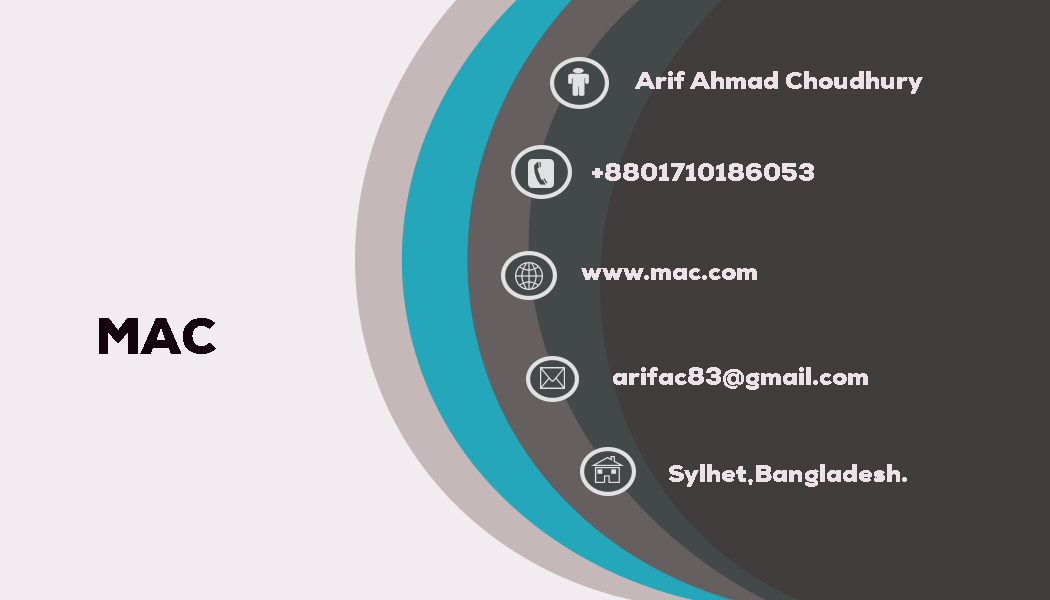
<style>
.page{position:relative;width:1050px;height:600px;background:#f2ebef}
.page>*{position:absolute;margin:0}
.t1{font:25px "NexaW01-Black";color:#ede2e8}
.t2{font:50px "NexaW01-Black";color:#15030d}
</style>
<div class="page">
<p class="t1" style="left:635px;top:71px;width:288px;height:23px">Arif Ahmad Choudhury</p>
<p class="t1" style="left:592px;top:163px;width:222px;height:18px">+8801710186053</p>
<p class="t1" style="left:581px;top:268px;width:176px;height:12px">www.mac.com</p>
<p class="t2" style="left:99px;top:318px;width:117px;height:36px">MAC</p>
<p class="t1" style="left:613px;top:367px;width:255px;height:23px">arifac83@gmail.com</p>
<p class="t1" style="left:669px;top:464px;width:238px;height:23px">Sylhet,Bangladesh.</p>
</div>
